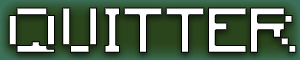
<style>
.page{position:relative;width:300px;height:60px}
.page>*{position:absolute;margin:0}
.t1{font:60.3px "Minecraft";color:#ffffff}
</style>
<div class="page">
<p class="t1" style="left:8px;top:7px;width:289px;height:46px">QUITTER</p>
</div>
